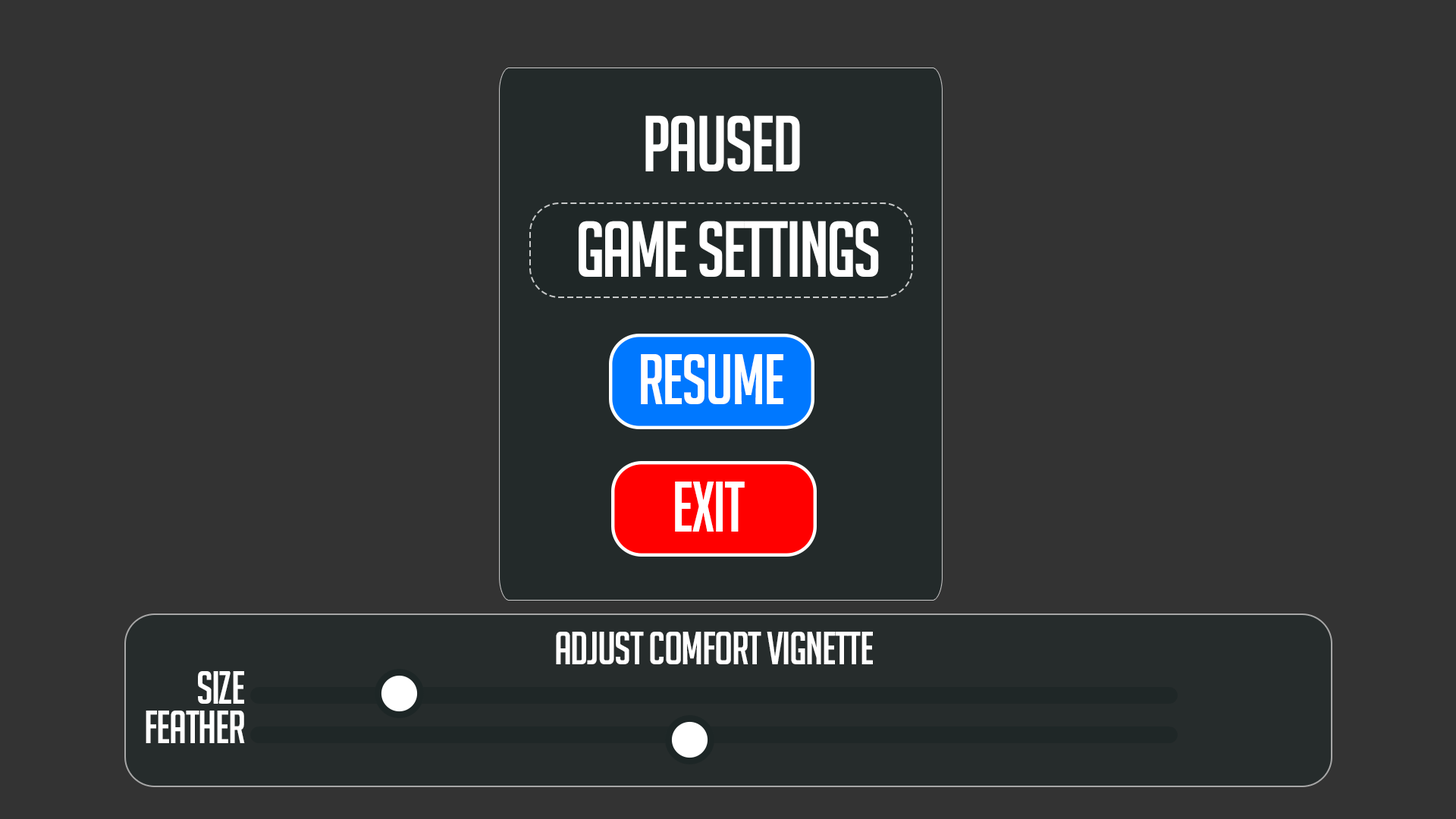
<style>
.page{position:relative;width:1456px;height:819px;background:#333333}
.page>*{position:absolute;margin:0}
.t1{font:77px "BigNoodleTitling";letter-spacing:-0.025em;color:#ffffff}
.t2{font:69.7px "BigNoodleTitling";letter-spacing:-0.025em;color:#ffffff}
.t3{font:45.5px "BigNoodleTitling";letter-spacing:-0.025em;color:#ffffff}
</style>
<div class="page">
<p class="t1" style="left:645px;top:115px;width:155px;height:56px">paused</p>
<p class="t1" style="left:579px;top:221px;width:300px;height:56px">game settings</p>
<p class="t2" style="left:641px;top:354px;width:142px;height:50px">resume</p>
<p class="t2" style="left:675px;top:482px;width:70px;height:50px">Exit</p>
<p class="t3" style="left:556px;top:632px;width:317px;height:32px">Adjust comfort vignette</p>
<p class="t3" style="left:198px;top:671px;width:46px;height:33px">size</p>
<p class="t3" style="left:146px;top:711px;width:99px;height:32px">feather</p>
</div>
